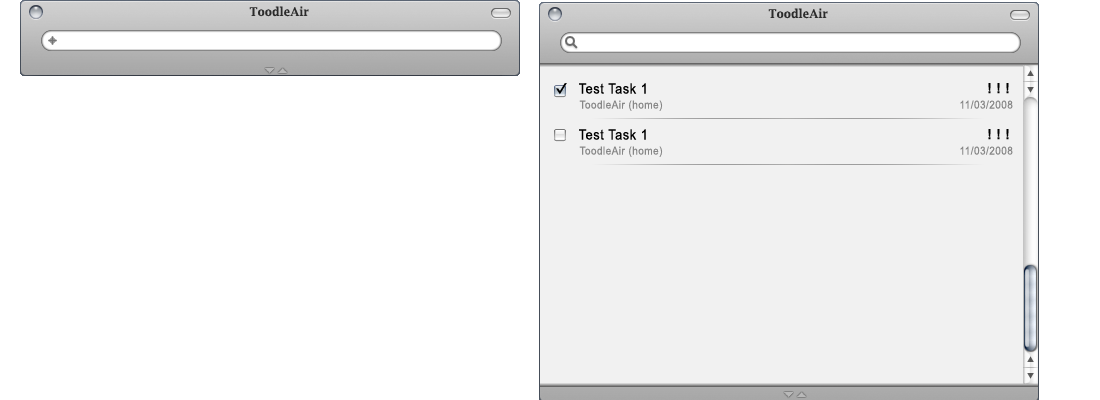
<style>
.page{position:relative;width:1100px;height:400px;background:#ffffff}
.page>*{position:absolute;margin:0}
.t1{font:12px "LucidaBright-Demi";letter-spacing:0.05em;color:#2b2b2b;scale:0.9 1}
.t2{font:14px "ArialMT";letter-spacing:0.05em;color:#000000;scale:0.9 1}
.t3{font:14px "Arial-BoldMT";letter-spacing:0.05em;color:#000000;scale:0.9 1}
.t4{font:11px "ArialMT";letter-spacing:0.05em;color:#878787;scale:0.9 1}
</style>
<div class="page">
<p class="t1" style="left:249px;top:6px;width:60px;height:11px">ToodleAir</p>
<p class="t1" style="left:768px;top:8px;width:60px;height:11px">ToodleAir</p>
<p class="t2" style="left:579px;top:83px;width:67px;height:11px">Test Task 1</p>
<p class="t3" style="left:988px;top:83px;width:21px;height:11px">! ! !</p>
<p class="t4" style="left:579px;top:100px;width:84px;height:11px">ToodleAir (home)</p>
<p class="t4" style="left:960px;top:100px;width:53px;height:9px">11/03/2008</p>
<p class="t2" style="left:579px;top:129px;width:67px;height:11px">Test Task 1</p>
<p class="t3" style="left:988px;top:129px;width:21px;height:11px">! ! !</p>
<p class="t4" style="left:579px;top:146px;width:84px;height:11px">ToodleAir (home)</p>
<p class="t4" style="left:960px;top:146px;width:53px;height:9px">11/03/2008</p>
</div>
